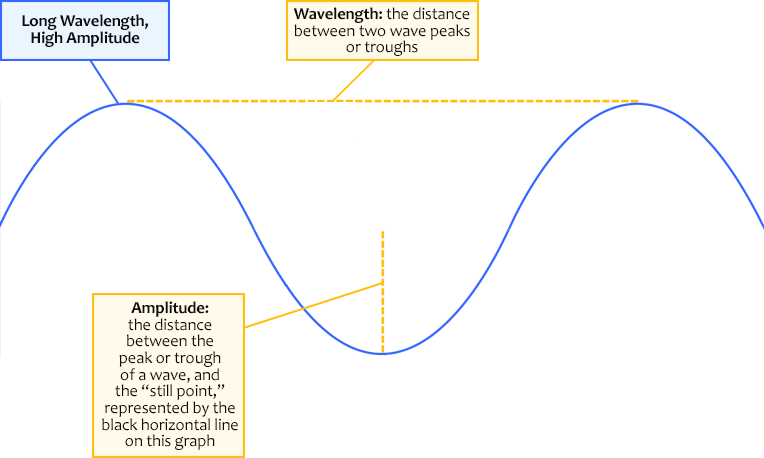
<style>
.page{position:relative;width:764px;height:458px;background:#ffffff}
.page>*{position:absolute;margin:0}
.t1{font:16.7px/16.7px "Candara-Bold";letter-spacing:-0.01em;color:#0c0c0b}
.t2{font:16.7px/16.7px "Candara";letter-spacing:-0.01em;color:#0c0c0b}
</style>
<div class="page">
<p class="t1" style="left:22px;top:14px;width:126px;height:33px;text-align:center">Long Wavelength,<br>High Amplitude</p>
<p class="t2" style="left:293px;top:7px;width:177px;height:49px;text-align:center"><span class="t1">Wavelength: </span>the distance<br>between two wave peaks<br>or troughs</p>
<p class="t2" style="left:102px;top:301px;width:136px;height:149px;text-align:center"><span class="t1">Amplitude:<br></span>the distance<br>between the<br>peak or trough<br>of a wave, and<br>the “still point,”<br>represented by the<br>black horizontal line<br>on this graph</p>
</div>
